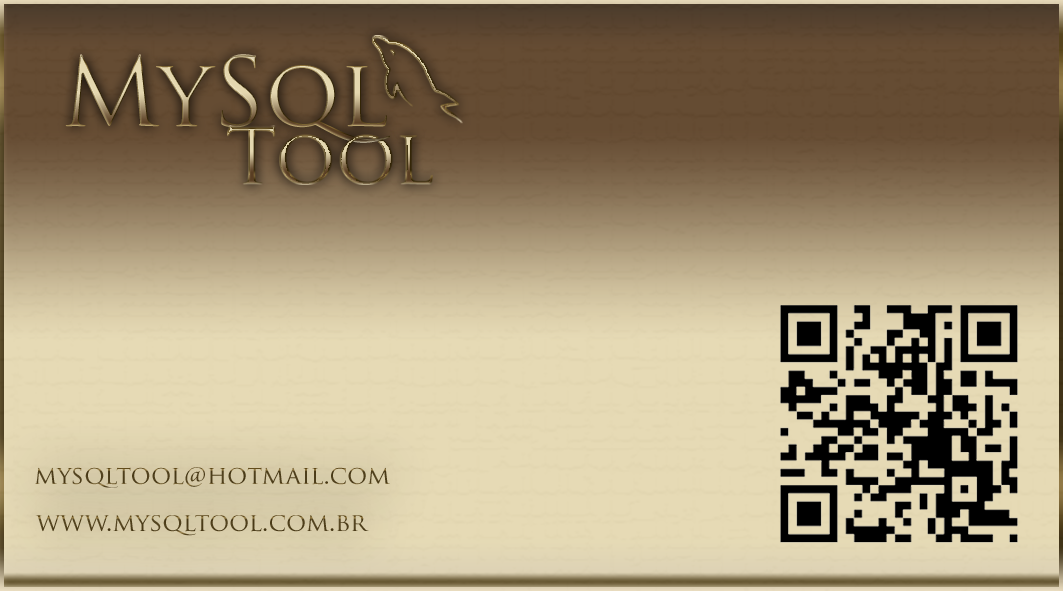
<style>
.page{position:relative;width:1063px;height:591px}
.page>*{position:absolute;margin:0}
.t1{font:93.6px "TrajanPro-Regular"}
.t2{font:25px "TrajanPro-Regular";color:#4f3f1c}
.t3{font:25px "TrajanPro-Regular";color:#51421d}
</style>
<div class="page">
<p class="t1" style="left:65px;top:54px;width:325px;height:89px">MySql</p>
<p class="t2" style="left:35px;top:467px;width:355px;height:22px">mysqltool@hotmail.com</p>
<p class="t3" style="left:35px;top:514px;width:334px;height:22px">www.mysqltool.com.br</p>
</div>
